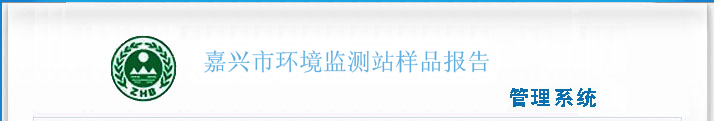
<style>
.page{position:relative;width:714px;height:121px;background:#fdfdfd}
.page>*{position:absolute;margin:0}
.t1{font:24px "SimSun";color:#5eaedf}
</style>
<div class="page">
<p class="t1" style="left:204px;top:50px;width:285px;height:23px">嘉兴市环境监测站样品报告</p>
</div>
